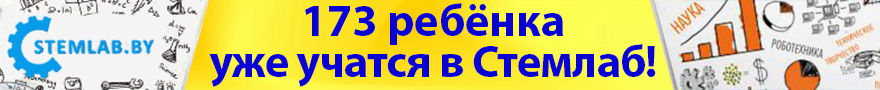
<style>
.page{position:relative;width:880px;height:90px}
.page>*{position:absolute;margin:0}
.t1{font:45.8px/41.7px "MyriadPro-Bold";letter-spacing:-0.02em;color:#0a00d4}
.t2{font:45.8px/41.7px "MyriadPro-Bold";color:#0a00d4}
</style>
<div class="page">
<p class="t1" style="left:209px;top:3px;width:447px;height:84px;text-align:center"><span class="t2">173 ребёнка<br></span>уже учатся в Стемлаб!</p>
</div>
